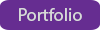
<style>
.page{position:relative;width:100px;height:30px;background:#662d91}
.page>*{position:absolute;margin:0}
.t1{font:18px "MyriadPro-Regular";color:#d7d9d8}
</style>
<div class="page">
<p class="t1" style="left:19px;top:8px;width:63px;height:13px">Portfolio</p>
</div>
